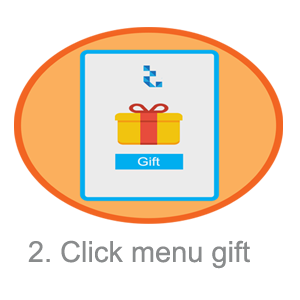
<style>
.page{position:relative;width:300px;height:300px;background:#ffffff}
.page>*{position:absolute;margin:0}
.t1{font:28.9px "ArialMT";color:#898b8c}
</style>
<div class="page">
<p class="t1" style="left:28px;top:240px;width:222px;height:29px">2. Click menu gift</p>
</div>
